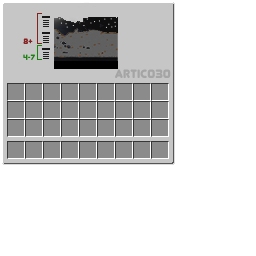
<style>
.page{position:relative;width:256px;height:256px;background:#ffffff}
.page>*{position:absolute;margin:0}
.t1{font:7.8px "Junegull-Regular";color:#1a830c}
.t2{font:12px "Junegull-Regular";color:#a5a5a5}
</style>
<div class="page">
<p class="t1" style="left:23px;top:54px;width:12px;height:6px">4-7</p>
<p class="t2" style="left:115px;top:69px;width:56px;height:9px">artic030</p>
</div>
